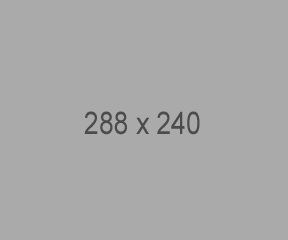
<style>
.page{position:relative;width:288px;height:240px;background:#aaaaaa}
.page>*{position:absolute;margin:0}
.t1{font:31.3px "ArialMT";color:#4b4b4b;scale:0.85 1}
</style>
<div class="page">
<p class="t1" style="left:84px;top:111px;width:116px;height:24px">288 x 240</p>
</div>
